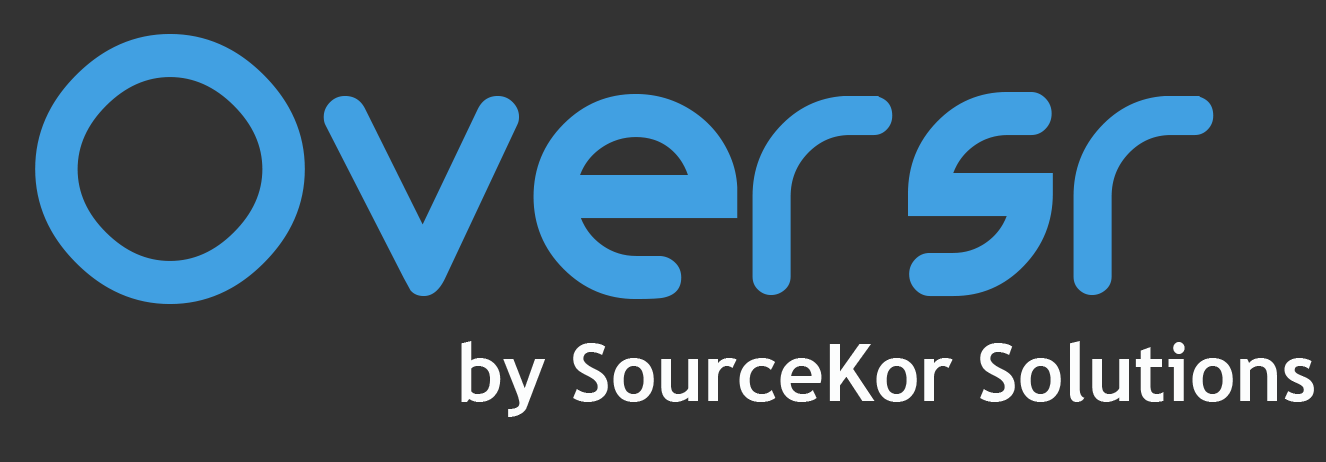
<style>
.page{position:relative;width:1326px;height:462px;background:#333333}
.page>*{position:absolute;margin:0}
.t1{font:400px "MonoglycerideBold";color:#41a0e2}
.t2{font:80px "TrebuchetMS-Bold";color:#fcfdfd}
</style>
<div class="page">
<p class="t1" style="left:35px;top:34px;width:1179px;height:270px">Oversr</p>
<p class="t2" style="left:461px;top:341px;width:853px;height:76px">by SourceKor Solutions</p>
</div>
